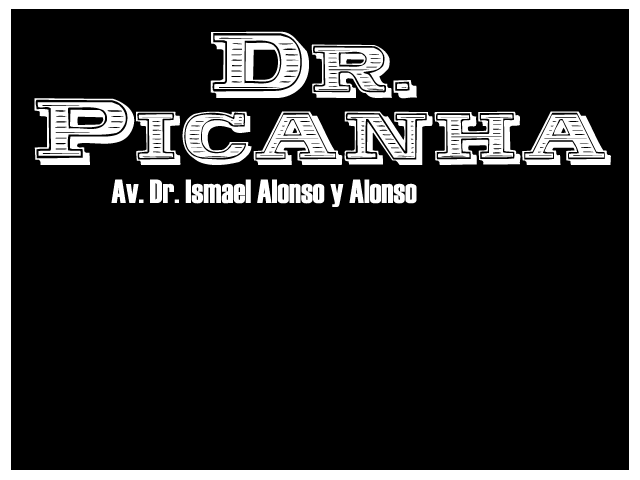
<style>
.page{position:relative;width:640px;height:480px;background:#000000}
.page>*{position:absolute;margin:0}
.t1{font:83.3px "Woodcut";color:#ffffff}
.t2{font:33.3px "Haettenschweiler";color:#ffffff}
</style>
<div class="page">
<p class="t1" style="left:210px;top:31px;width:207px;height:68px">Dr.</p>
<p class="t1" style="left:34px;top:98px;width:577px;height:67px">Picanha</p>
<p class="t2" style="left:111px;top:179px;width:306px;height:28px">Av. Dr. Ismael Alonso y Alonso</p>
</div>
